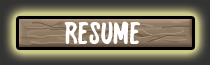
<style>
.page{position:relative;width:210px;height:65px}
.page>*{position:absolute;margin:0}
.t1{font:30px "BroadwayCopyistText";color:#ffffff}
</style>
<div class="page">
<p class="t1" style="left:64px;top:21px;width:77px;height:23px">RESUME</p>
</div>
